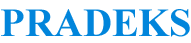
<style>
.page{position:relative;width:191px;height:43px;background:#ffffff}
.page>*{position:absolute;margin:0}
.t1{font:40px "TimesNewRomanPS-BoldMT";color:#0185db}
</style>
<div class="page">
<p class="t1" style="left:1px;top:9px;width:189px;height:28px">PRADEKS</p>
</div>
